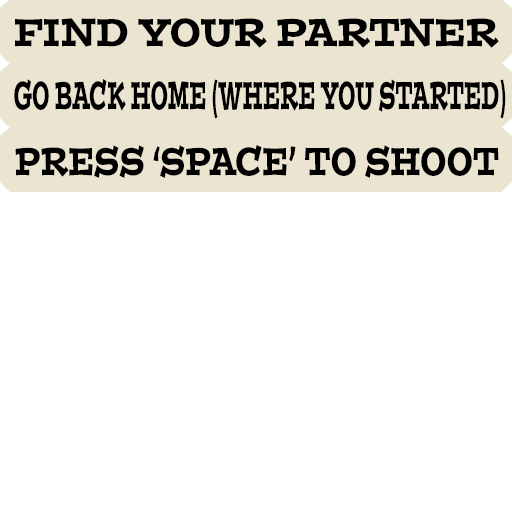
<style>
.page{position:relative;width:512px;height:512px;background:#ffffff}
.page>*{position:absolute;margin:0}
.t1{font:38.8px "PostinoStd";color:#000000;scale:0.81 1}
.t2{font:38.8px "PostinoStd";color:#000000;scale:0.45 1}
.t3{font:38.8px "PostinoStd";color:#000000;scale:0.68 1}
</style>
<div class="page">
<p class="t1" style="left:15px;top:18px;width:484px;height:30px">FIND YOUR PARTNER</p>
<p class="t2" style="left:14px;top:79px;width:492px;height:40px">GO BACK HOME (WHERE YOU STARTED)</p>
<p class="t3" style="left:15px;top:145px;width:484px;height:33px">PRESS ‘SPACE’ TO SHOOT</p>
</div>
